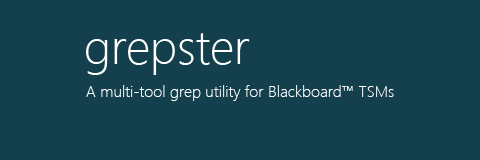
<style>
.page{position:relative;width:480px;height:160px;background:#13404c}
.page>*{position:absolute;margin:0}
.t1{font:48px "SegoeUI-Light";color:#ffffff}
.t2{font:16px "SegoeUI-Light";color:#ffffff}
</style>
<div class="page">
<p class="t1" style="left:86px;top:33px;width:164px;height:42px">grepster</p>
<p class="t2" style="left:86px;top:85px;width:308px;height:16px">A multi-tool grep utility for Blackboard™ TSMs</p>
</div>
